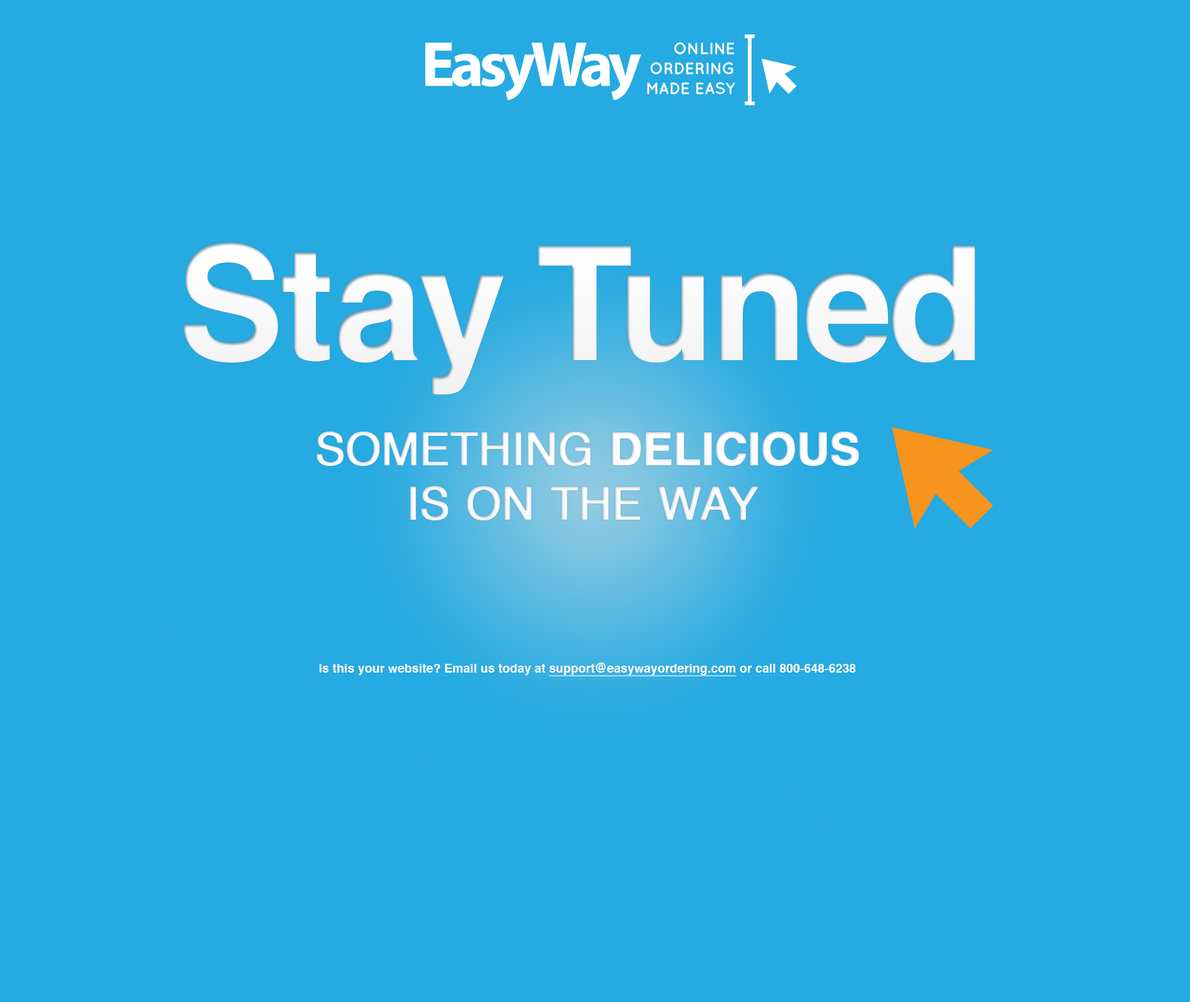
<style>
.page{position:relative;width:1190px;height:1002px;background:#25aae1}
.page>*{position:absolute;margin:0}
.t1{font:158.8px "Helvetica-Bold";letter-spacing:-0.025em;color:#ffffff}
.t2{font:45.1px "Helvetica";letter-spacing:-0.01em;color:#ffffff;text-transform:uppercase;font-weight:bold}
.t3{font:45.1px "Helvetica-Bold";letter-spacing:-0.01em;color:#ffffff;text-transform:uppercase;font-weight:bold}
.t4{font:12.1px "Helvetica-Bold";letter-spacing:0.01em;color:#ffffff}
.t5{font:12.1px "Helvetica-Bold";letter-spacing:0.01em;color:#ffffff;text-decoration:underline}
</style>
<div class="page">
<p class="t1" style="left:184px;top:242px;width:791px;height:153px">Stay Tuned</p>
<p class="t2" style="left:316px;top:432px;width:543px;height:88px;text-align:center">Something <span class="t3">Delicious </span><br>is On The Way</p>
<p class="t4" style="left:319px;top:663px;width:537px;height:13px">Is this your website? Email us today at <span class="t5">support@easywayordering.com</span> or call 800-648-6238</p>
</div>
